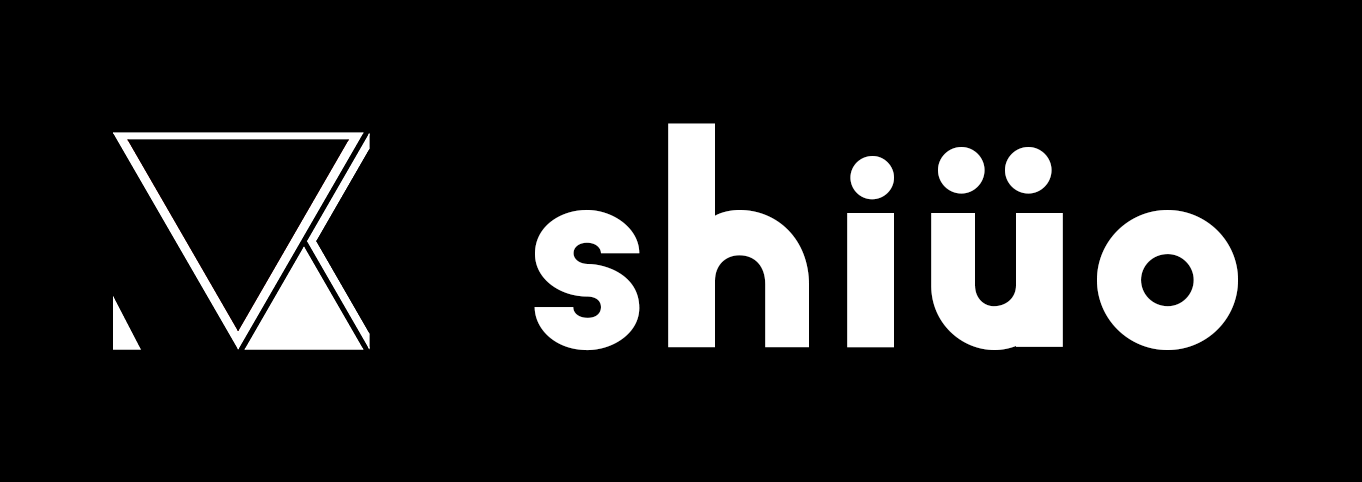
<style>
.page{position:relative;width:1362px;height:482px;background:#000000}
.page>*{position:absolute;margin:0}
.t1{font:291.7px "BigJohnPRO-Bold";color:#ffffff}
</style>
<div class="page">
<p class="t1" style="left:534px;top:123px;width:704px;height:228px">shiüo</p>
</div>
